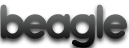
<style>
.page{position:relative;width:129px;height:48px;background:#ffffff}
.page>*{position:absolute;margin:0}
.t1{font:41.4px "HowiesFunhouse";letter-spacing:-0.16em;font-weight:bold}
</style>
<div class="page">
<p class="t1" style="left:0px;top:4px;width:127px;height:44px">beagle</p>
</div>
